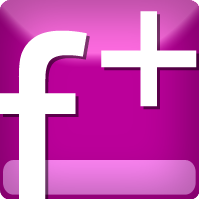
<style>
.page{position:relative;width:199px;height:199px;background:#ffffff}
.page>*{position:absolute;margin:0}
.t1{font:200px "ArialMT";color:#ffffff}
.t2{font:300px "ArialMT";color:#ffffff}
</style>
<div class="page">
<p class="t1" style="left:101px;top:11px;width:96px;height:96px">+</p>
<p class="t2" style="left:0px;top:30px;width:87px;height:169px">f</p>
</div>
